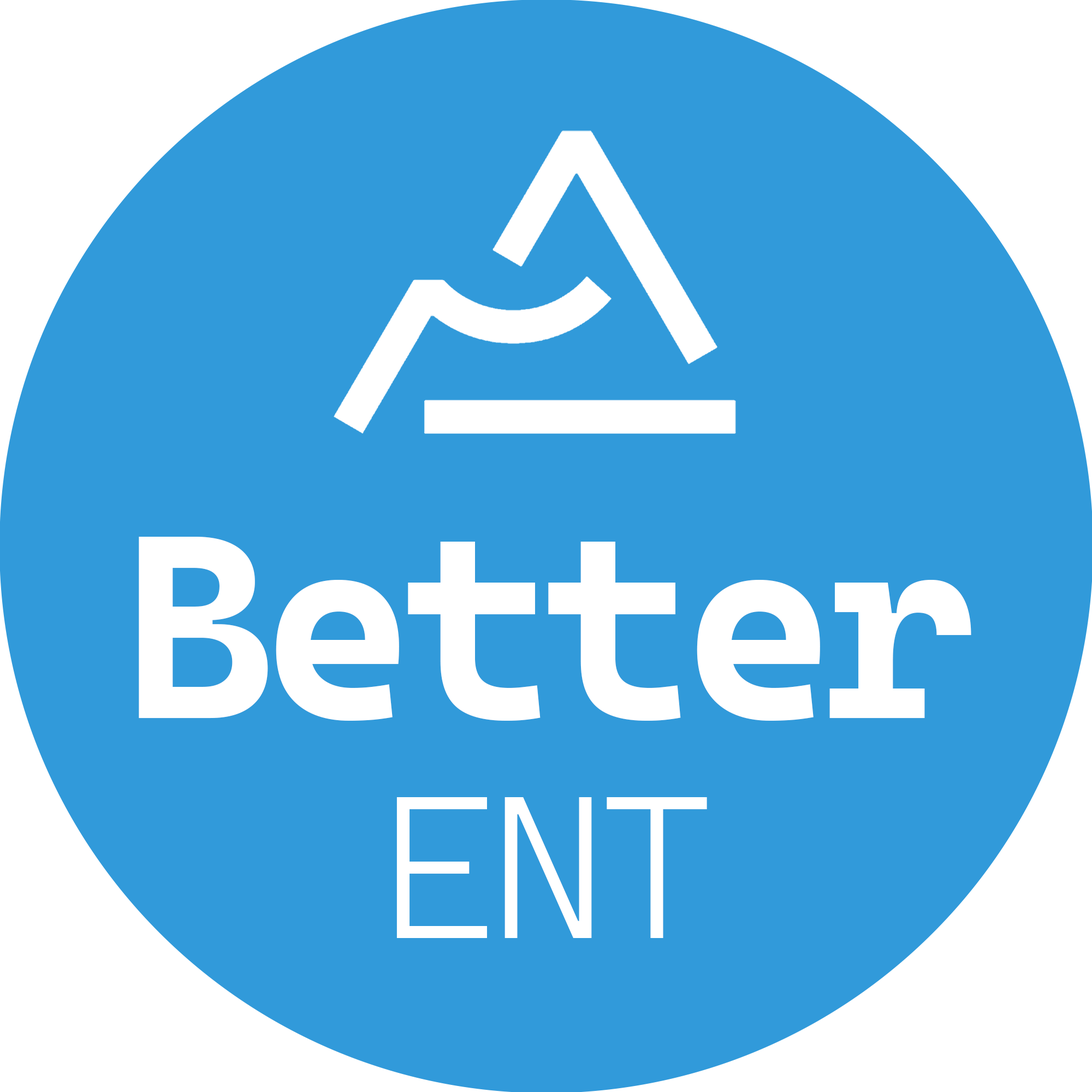
<style>
.page{position:relative;width:1092px;height:1092px;background:#319ada}
.page>*{position:absolute;margin:0}
.t1{font:261.7px/220px "CascadiaCodeRoman-Bold";letter-spacing:-0.05em;color:#ffffff;font-weight:bold;font-style:italic}
.t2{font:203.1px/220px "CascadiaCodeRoman-Light";letter-spacing:-0.05em;color:#ffffff;font-weight:bold;font-style:italic}
</style>
<div class="page">
<p class="t1" style="left:139px;top:537px;width:832px;height:401px;text-align:center">Better<br><span class="t2">ENT</span></p>
</div>
